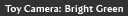
<style>
.page{position:relative;width:128px;height:16px;background:#333333}
.page>*{position:absolute;margin:0}
.t1{font:9.6px "AmiraParadiso";letter-spacing:0.05em;color:#ffffff}
</style>
<div class="page">
<p class="t1" style="left:5px;top:5px;width:118px;height:9px">Toy Camera: Bright Green</p>
</div>
